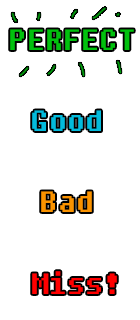
<style>
.page{position:relative;width:140px;height:320px;background:#ffffff}
.page>*{position:absolute;margin:0}
.t1{font:29.2px "Fixedsys";color:#01c10e}
.t2{font:29.2px "Fixedsys";color:#03bbdc}
.t3{font:29.2px "Fixedsys";color:#f99200}
.t4{font:29.2px "Fixedsys";color:#ff0000}
</style>
<div class="page">
<p class="t1" style="left:10px;top:29px;width:124px;height:21px">PERFECT</p>
<p class="t2" style="left:32px;top:110px;width:69px;height:21px">Good</p>
<p class="t3" style="left:41px;top:191px;width:51px;height:21px">Bad</p>
<p class="t4" style="left:32px;top:271px;width:85px;height:23px">Miss!</p>
</div>
